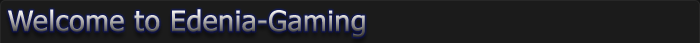
<style>
.page{position:relative;width:700px;height:43px;background:#1b1b1b}
.page>*{position:absolute;margin:0}
.t1{font:28px "Tahoma";font-weight:bold}
</style>
<div class="page">
<p class="t1" style="left:8px;top:9px;width:357px;height:29px">Welcome to Edenia-Gaming</p>
</div>
